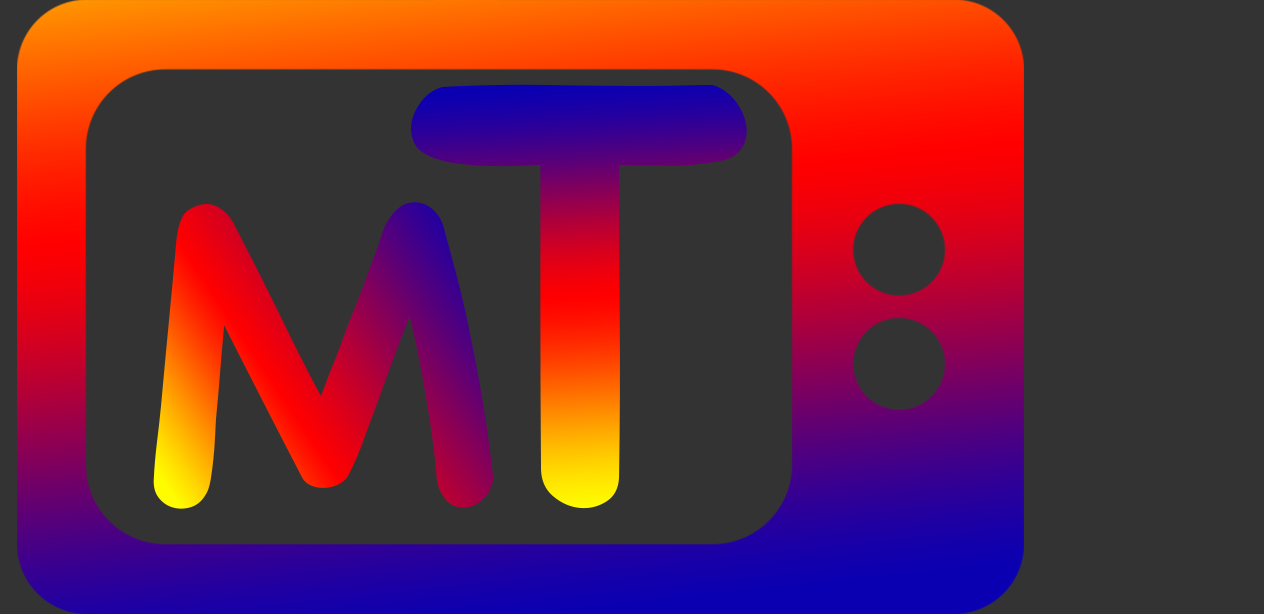
<style>
.page{position:relative;width:1264px;height:614px;background:#333333}
.page>*{position:absolute;margin:0}
.t1{font:583.3px "ChalkboardSE-Bold"}
.t2{font:416.7px "ChalkboardSE-Bold"}
</style>
<div class="page">
<p class="t1" style="left:411px;top:84px;width:336px;height:425px">T</p>
<p class="t2" style="left:153px;top:202px;width:341px;height:307px">M</p>
</div>
